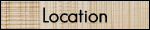
<style>
.page{position:relative;width:150px;height:30px}
.page>*{position:absolute;margin:0}
.t1{font:20px "GeosansLight";color:#000000;font-weight:bold}
</style>
<div class="page">
<p class="t1" style="left:43px;top:7px;width:64px;height:16px">Location</p>
</div>
